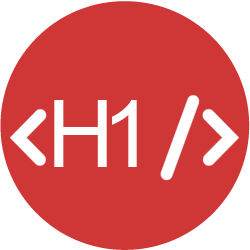
<style>
.page{position:relative;width:250px;height:250px;background:#cf3736}
.page>*{position:absolute;margin:0}
.t1{font:93px "ArialMT";letter-spacing:-0.125em;color:#ffffff}
</style>
<div class="page">
<p class="t1" style="left:54px;top:100px;width:83px;height:67px">H1</p>
</div>
